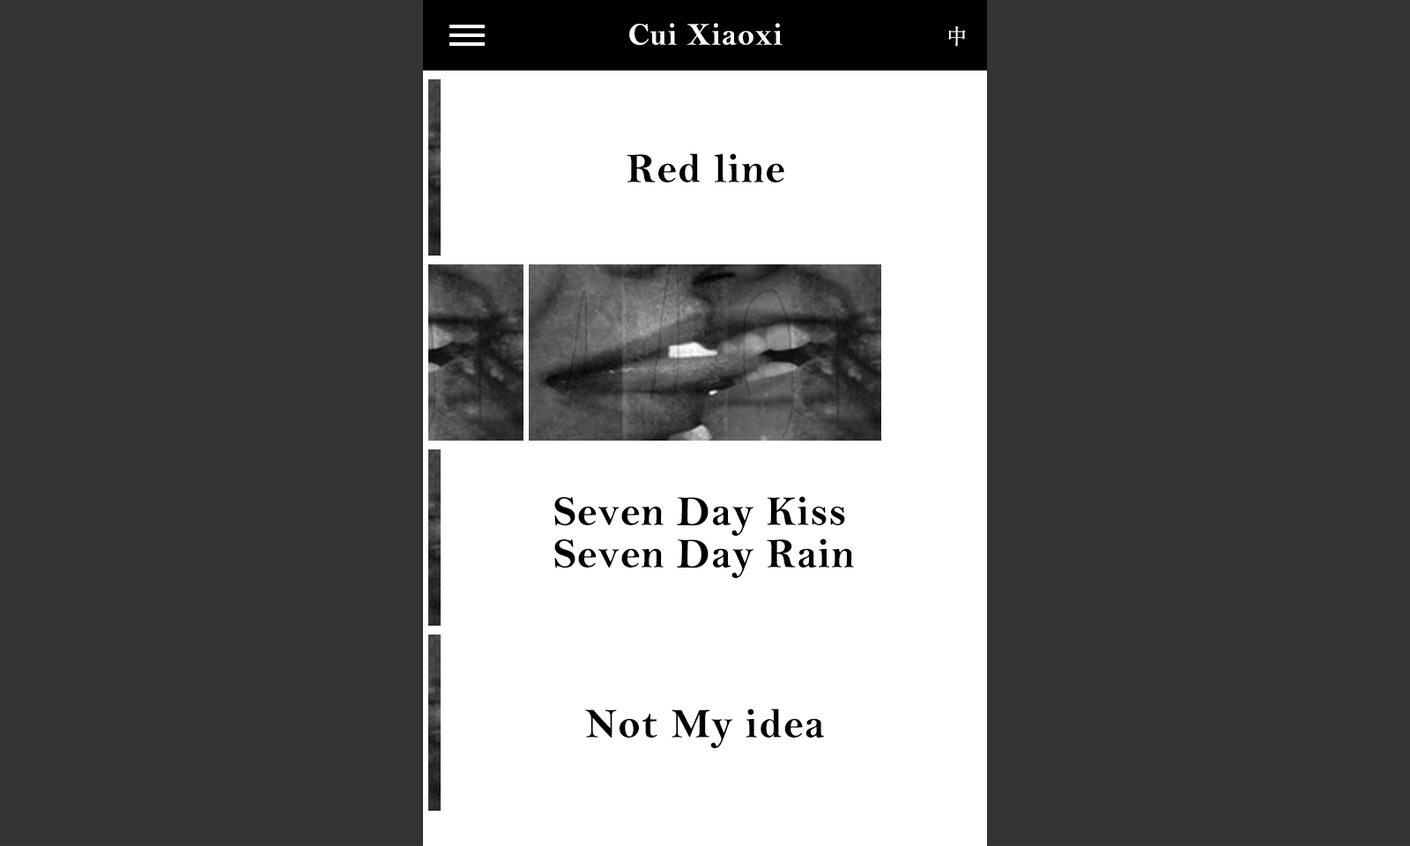
<style>
.page{position:relative;width:1410px;height:846px;background:#333333}
.page>*{position:absolute;margin:0}
.t1{font:31.7px "BellMTBold";letter-spacing:0.02em;color:#ffffff}
.t2{font:31.7px "BellMTBold";letter-spacing:0.02em;color:#ffffff;text-transform:uppercase}
.t3{font:21.1px "STSongti-SC-Regular";letter-spacing:0.02em;color:#ffffff;text-transform:uppercase}
.t4{font:42.3px "BellMTBold";letter-spacing:0.02em;color:#000000}
.t5{font:42.3px/42.3px "BellMTBold";letter-spacing:0.02em;color:#000000}
</style>
<div class="page">
<p class="t1" style="left:629px;top:23px;width:153px;height:22px"><span class="t2">c</span>ui <span class="t2">x</span>iaoxi</p>
<p class="t3" style="left:948px;top:26px;width:18px;height:21px">中</p>
<p class="t4" style="left:626px;top:153px;width:158px;height:29px">Red line</p>
<p class="t5" style="left:554px;top:496px;width:300px;height:82px">Seven Day Kiss <br>Seven Day Rain</p>
<p class="t4" style="left:585px;top:708px;width:239px;height:40px">Not My idea</p>
</div>
